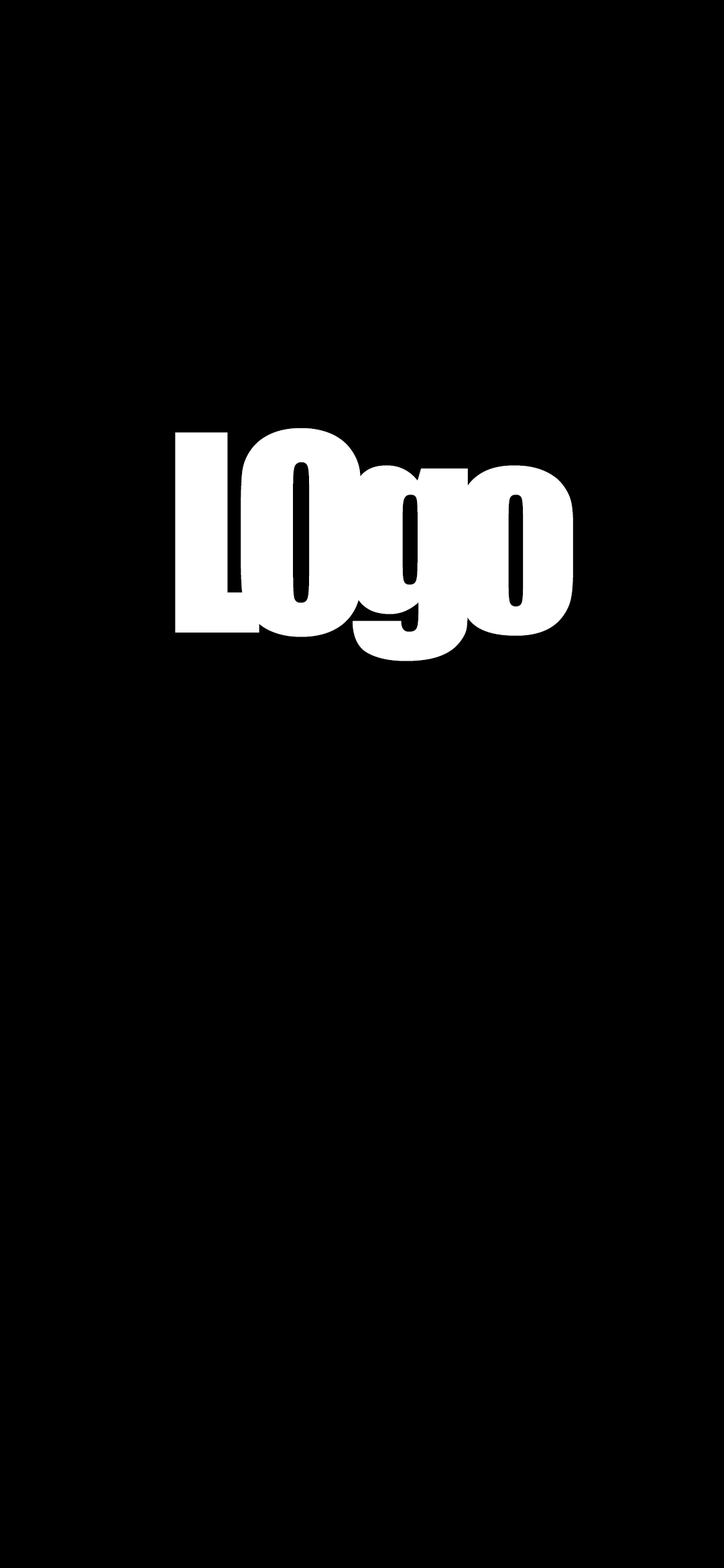
<style>
.page{position:relative;width:724px;height:1568px;background:#000000}
.page>*{position:absolute;margin:0}
.t1{font:253.1px "Impact";letter-spacing:-0.1em;color:#ffffff}
</style>
<div class="page">
<p class="t1" style="left:175px;top:428px;width:398px;height:233px">LOgo</p>
</div>
